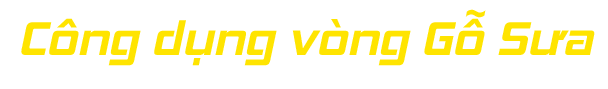
<style>
.page{position:relative;width:608px;height:89px;background:#ffffff}
.page>*{position:absolute;margin:0}
.t1{font:48.3px "SVN-HemiHead";color:#ffe400}
</style>
<div class="page">
<p class="t1" style="left:21px;top:9px;width:574px;height:57px">Công dụng vòng Gỗ Sưa</p>
</div>
